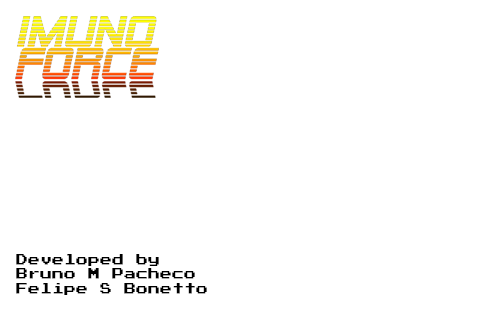
<style>
.page{position:relative;width:499px;height:312px;background:#ffffff}
.page>*{position:absolute;margin:0}
.t1{font:12px "PressStart2P";color:#000000}
</style>
<div class="page">
<p class="t1" style="left:16px;top:254px;width:191px;height:41px;text-align:right">Developed by<br>Bruno M Pacheco<br>Felipe S Bonetto</p>
</div>
